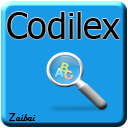
<style>
.page{position:relative;width:128px;height:128px;background:#189ae7}
.page>*{position:absolute;margin:0}
.t1{font:36px "Tahoma";color:#000000}
.t2{font:10px "HarlowSolid";color:#000000}
.t3{font:10px "HelveticaNeueLTPro-Roman";color:#000000;font-weight:bold}
</style>
<div class="page">
<p class="t1" style="left:7px;top:12px;width:113px;height:27px">Codilex</p>
<p class="t2" style="left:9px;top:113px;width:27px;height:9px"><span class="t3">Z</span>aibai</p>
</div>
